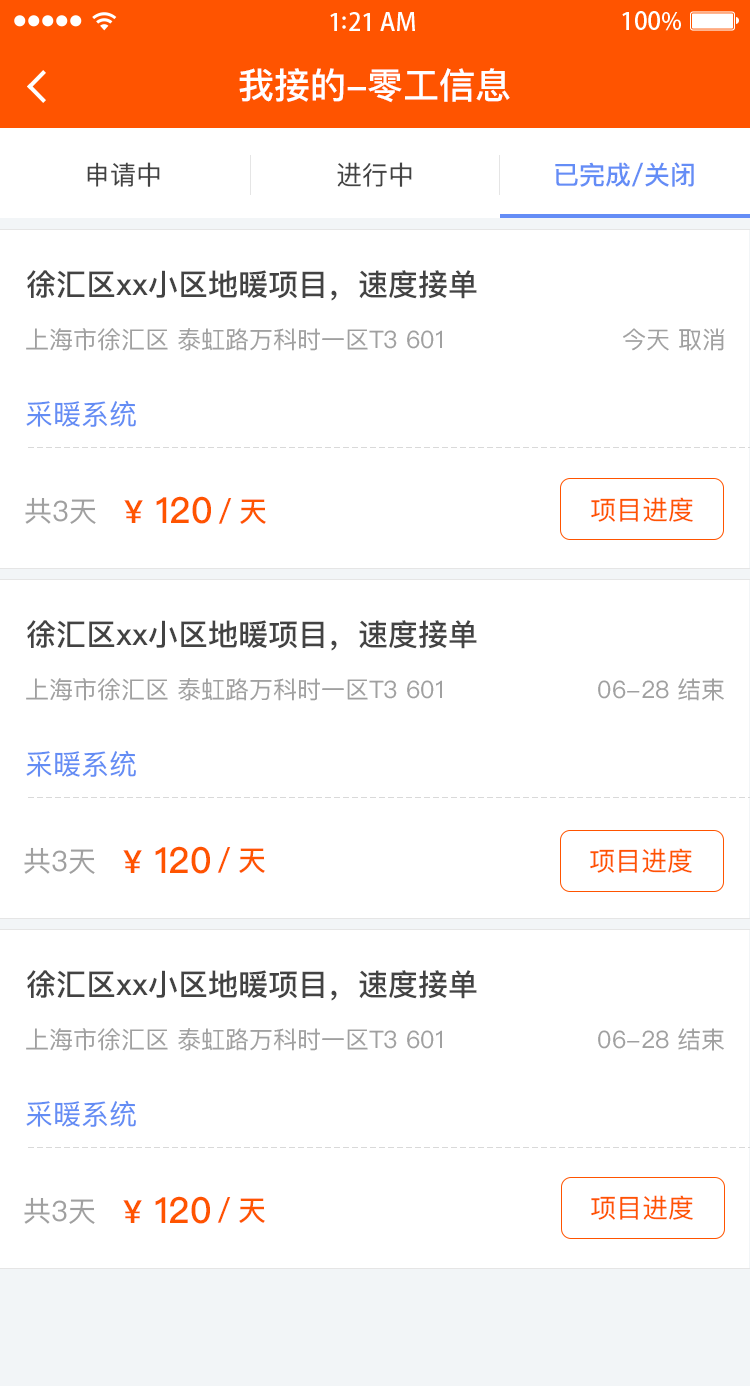
<style>
.page{position:relative;width:750px;height:1386px;background:#ffffff}
.page>*{position:absolute;margin:0}
.t1{font:36px "PingFangSC-Medium";color:#ffffff}
.t2{font:26px "PingFangSC-Regular";color:#434343}
.t3{font:26px "PingFangSC-Medium";color:#648df6}
.t4{font:30px "PingFangSC-Medium";color:#434343}
.t5{font:24px "PingFangSC-Regular";color:#a0a0a0}
.t6{font:28px "PingFangSC-Regular";color:#648df4}
.t7{font:28px "PingFangSC-Regular";color:#a0a0a0}
.t8{font:36px "PingFangSC-Medium";color:#ff5400}
.t9{font:32px "PingFangSC-Medium";color:#ff5400}
.t10{font:26px "PingFangSC-Regular";color:#ff5400}
.t11{font:28px "PingFangSC-Medium";color:#ff5400}
</style>
<div class="page">
<p class="t1" style="left:239px;top:68px;width:271px;height:35px">我接的-零工信息</p>
<p class="t2" style="left:87px;top:162px;width:73px;height:25px">申请中</p>
<p class="t2" style="left:337px;top:162px;width:75px;height:25px">进行中</p>
<p class="t3" style="left:555px;top:162px;width:139px;height:25px">已完成/关闭</p>
<p class="t4" style="left:27px;top:270px;width:450px;height:31px">徐汇区xx小区地暖项目，速度接单</p>
<p class="t5" style="left:26px;top:328px;width:416px;height:23px">上海市徐汇区 泰虹路万科时一区T3 601</p>
<p class="t5" style="left:623px;top:328px;width:102px;height:23px">今天 取消</p>
<p class="t6" style="left:26px;top:400px;width:110px;height:27px">采暖系统</p>
<p class="t7" style="left:25px;top:497px;width:71px;height:27px">共3天</p>
<p class="t8" style="left:124px;top:496px;width:87px;height:28px"><span class="t9">¥</span> 120</p>
<p class="t10" style="left:591px;top:497px;width:102px;height:25px">项目进度</p>
<p class="t11" style="left:218px;top:498px;width:48px;height:26px">／天</p>
<p class="t4" style="left:27px;top:620px;width:450px;height:31px">徐汇区xx小区地暖项目，速度接单</p>
<p class="t5" style="left:26px;top:678px;width:416px;height:23px">上海市徐汇区 泰虹路万科时一区T3 601</p>
<p class="t5" style="left:598px;top:678px;width:126px;height:23px">06-28 结束</p>
<p class="t6" style="left:26px;top:750px;width:110px;height:27px">采暖系统</p>
<p class="t8" style="left:123px;top:846px;width:87px;height:28px"><span class="t9">¥</span> 120</p>
<p class="t7" style="left:24px;top:847px;width:71px;height:27px">共3天</p>
<p class="t11" style="left:217px;top:847px;width:48px;height:26px">／天</p>
<p class="t10" style="left:590px;top:848px;width:102px;height:25px">项目进度</p>
<p class="t4" style="left:27px;top:970px;width:450px;height:31px">徐汇区xx小区地暖项目，速度接单</p>
<p class="t5" style="left:26px;top:1028px;width:416px;height:23px">上海市徐汇区 泰虹路万科时一区T3 601</p>
<p class="t5" style="left:598px;top:1028px;width:126px;height:23px">06-28 结束</p>
<p class="t6" style="left:26px;top:1100px;width:110px;height:27px">采暖系统</p>
<p class="t7" style="left:24px;top:1197px;width:71px;height:27px">共3天</p>
<p class="t8" style="left:123px;top:1196px;width:87px;height:28px"><span class="t9">¥</span> 120</p>
<p class="t11" style="left:217px;top:1197px;width:48px;height:26px">／天</p>
<p class="t10" style="left:591px;top:1195px;width:102px;height:25px">项目进度</p>
</div>
